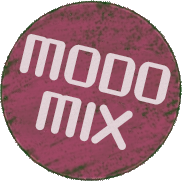
<style>
.page{position:relative;width:182px;height:182px;background:#ffffff}
.page>*{position:absolute;margin:0}
.t1{font:48px/52.2px "AokaneStd-EB";letter-spacing:-0.022em;color:#dacace}
</style>
<div class="page">
<p class="t1" style="left:19px;top:34px;width:152px;height:116px;text-align:center;rotate:14deg">MODO<br>MIX</p>
</div>
